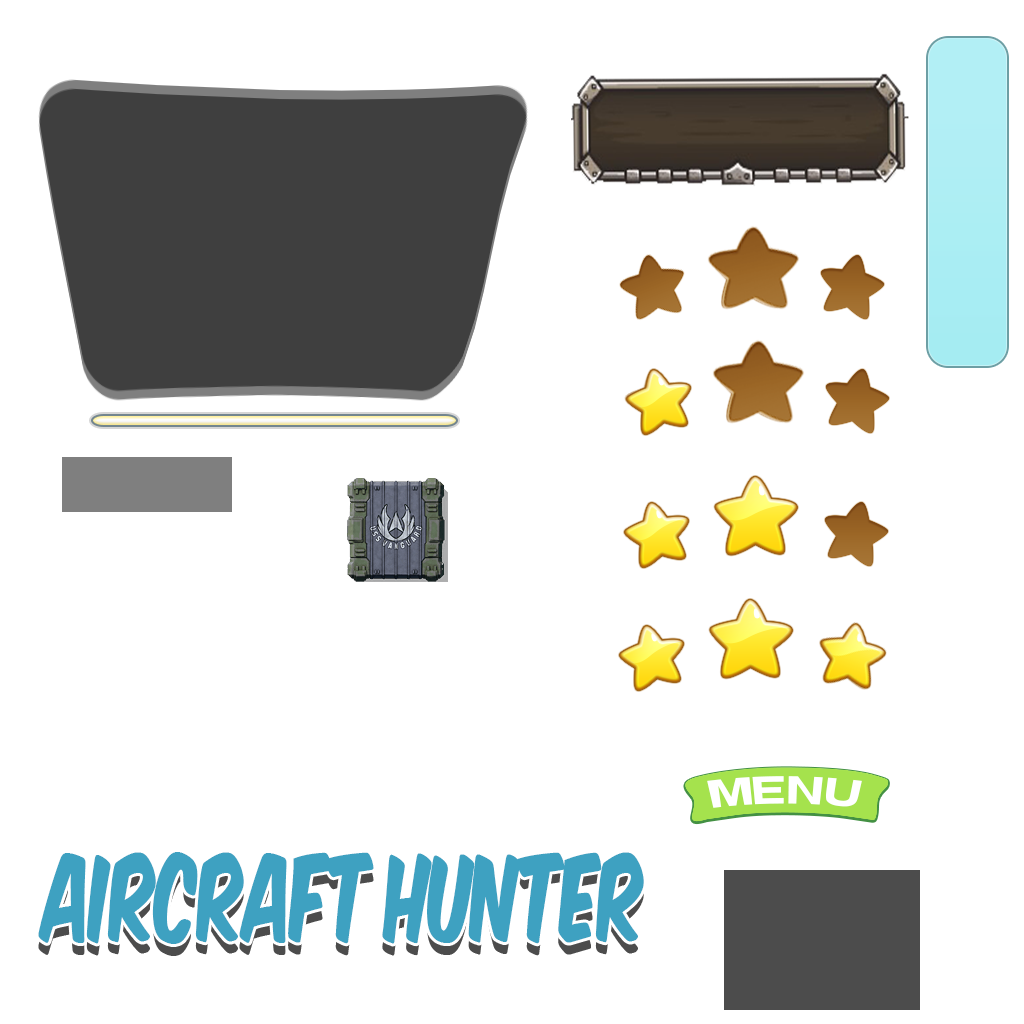
<style>
.page{position:relative;width:1024px;height:1024px;background:#ffffff}
.page>*{position:absolute;margin:0}
.t1{font:101.2px "KomikaPlanes";letter-spacing:-0.02em;color:#3ea1c1;scale:0.66 1}
</style>
<div class="page">
<p class="t1" style="left:38px;top:852px;width:606px;height:92px">AirCraft Hunter</p>
<p class="t1" style="left:38px;top:864px;width:606px;height:92px;opacity:0.7">AirCraft Hunter</p>
</div>
